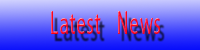
<style>
.page{position:relative;width:200px;height:50px}
.page>*{position:absolute;margin:0}
.t1{font:33.1px "MyriadPro-Regular";letter-spacing:0.06em;scale:0.54 1}
</style>
<div class="page">
<p class="t1" style="left:51px;top:11px;width:109px;height:23px">Latest   News</p>
</div>
